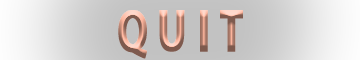
<style>
.page{position:relative;width:360px;height:60px}
.page>*{position:absolute;margin:0}
.t1{font:59.6px "MyriadPro-Bold";letter-spacing:0.22em;font-weight:bold;scale:0.71 1}
</style>
<div class="page">
<p class="t1" style="left:118px;top:10px;width:125px;height:49px">QUIT</p>
</div>
